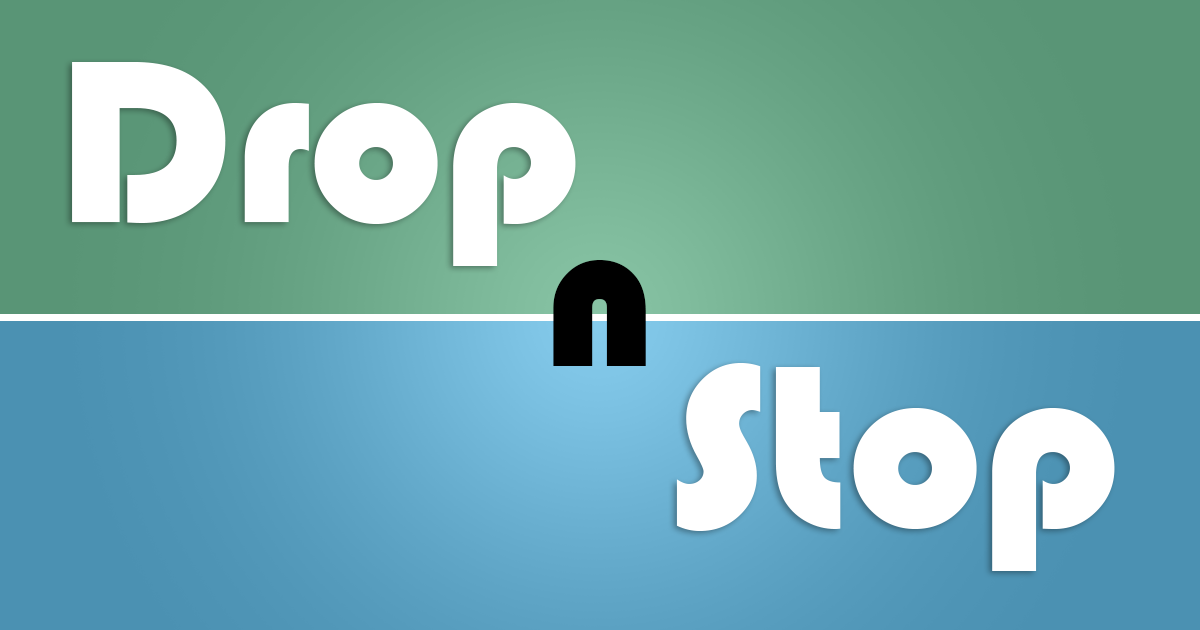
<style>
.page{position:relative;width:1200px;height:630px}
.page>*{position:absolute;margin:0}
.t1{font:240px "Bauhaus93";color:#ffffff}
.t2{font:213.1px "Bauhaus93";color:#000000}
</style>
<div class="page">
<p class="t1" style="left:72px;top:62px;width:504px;height:204px">Drop</p>
<p class="t2" style="left:553px;top:260px;width:93px;height:106px">n</p>
<p class="t1" style="left:676px;top:363px;width:439px;height:208px">Stop</p>
</div>
